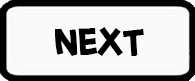
<style>
.page{position:relative;width:195px;height:81px;background:#fafafa}
.page>*{position:absolute;margin:0}
.t1{font:38px "CreativeBlockBBBold";letter-spacing:-0.05em;color:#000000}
</style>
<div class="page">
<p class="t1" style="left:55px;top:27px;width:89px;height:29px">next</p>
</div>
